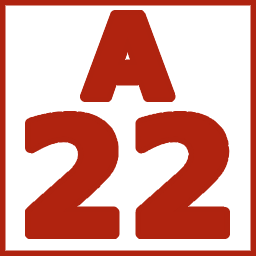
<style>
.page{position:relative;width:256px;height:256px;background:#ffffff}
.page>*{position:absolute;margin:0}
.t1{font:112.6px "Verdana-Bold";color:#b0230f}
.t2{font:158.6px "Verdana-Bold";color:#b0230f}
</style>
<div class="page">
<p class="t1" style="left:85px;top:15px;width:86px;height:82px">A</p>
<p class="t2" style="left:30px;top:116px;width:195px;height:118px">22</p>
</div>
